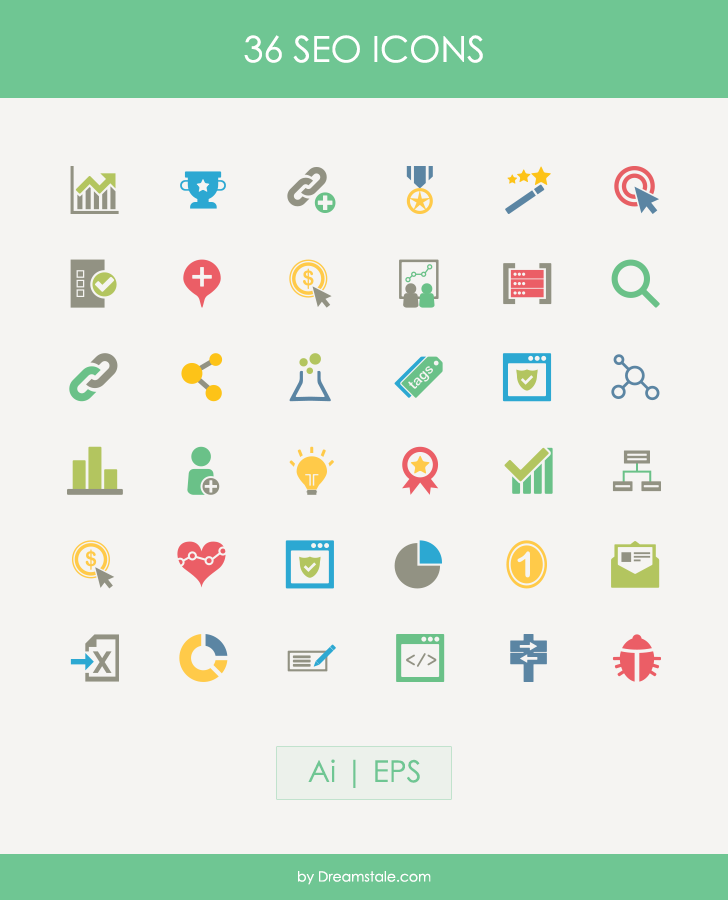
<style>
.page{position:relative;width:728px;height:900px;background:#f5f4f2}
.page>*{position:absolute;margin:0}
.t1{font:36px "CenturyGothic";color:#ffffff}
.t2{font:30px "CenturyGothic";color:#6fc693}
.t3{font:14px "CenturyGothic";color:#ffffff}
</style>
<div class="page">
<p class="t1" style="left:244px;top:35px;width:239px;height:28px">36 SEO ICONS</p>
<p class="t2" style="left:308px;top:759px;width:112px;height:29px">Ai | EPS</p>
<p class="t3" style="left:298px;top:871px;width:133px;height:14px">by Dreamstale.com</p>
</div>
